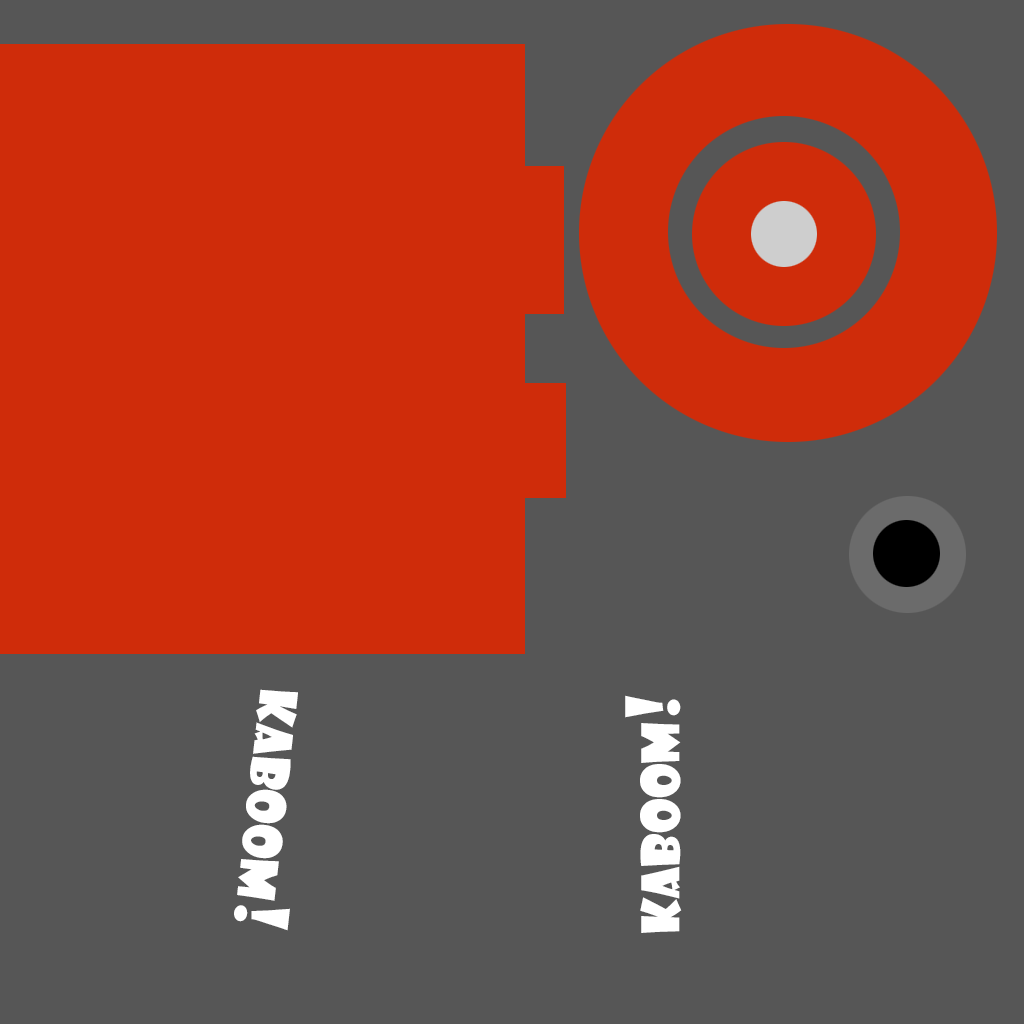
<style>
.page{position:relative;width:1024px;height:1024px;background:#565656}
.page>*{position:absolute;margin:0}
.t1{font:72px "ShowcardGothic-Reg";color:#ffffff;font-variant:small-caps}
</style>
<div class="page">
<p class="t1" style="left:234px;top:689px;width:64px;height:242px;rotate:96deg">kaboom!</p>
<p class="t1" style="left:625px;top:695px;width:57px;height:238px;rotate:-90deg">kaboom!</p>
</div>
